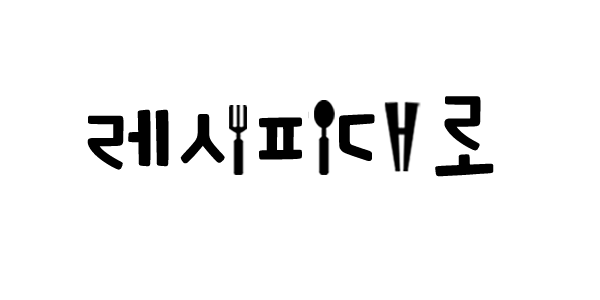
<style>
.page{position:relative;width:600px;height:300px;background:#ffffff}
.page>*{position:absolute;margin:0}
.t1{font:150px "TTHaneuljungwonR";color:#000000}
</style>
<div class="page">
<p class="t1" style="left:87px;top:96px;width:407px;height:81px">레시피대로</p>
</div>
